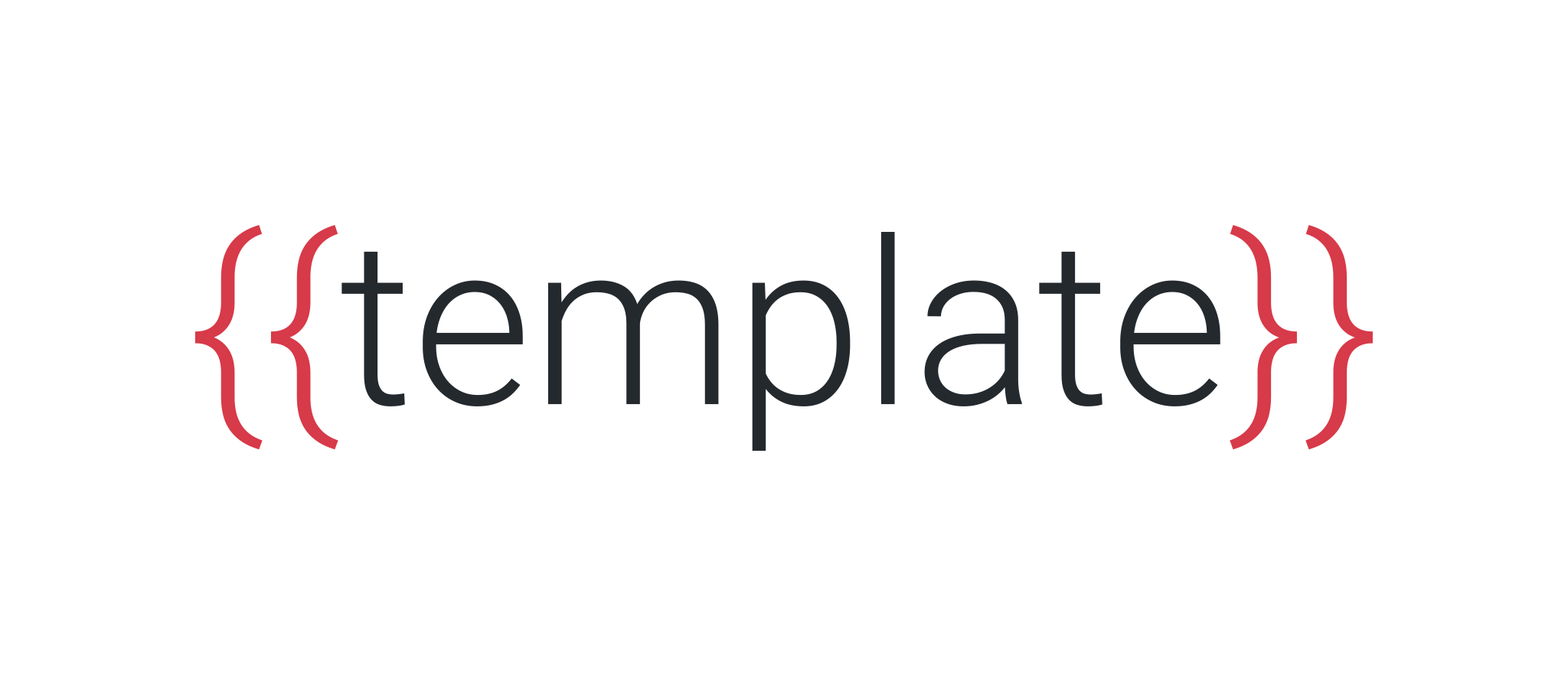
<style>
.page{position:relative;width:1568px;height:675px;background:#ffffff}
.page>*{position:absolute;margin:0}
.t1{font:229.7px "Roboto-Light";color:#24292e}
.t2{font:229.7px "Roboto-Light";color:#d73a49}
</style>
<div class="page">
<p class="t1" style="left:194px;top:225px;width:1179px;height:226px"><span class="t2">{{</span>template<span class="t2">}}</span></p>
</div>
